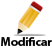
<style>
.page{position:relative;width:52px;height:48px;background:#ffffff}
.page>*{position:absolute;margin:0}
.t1{font:12px "MyriadPro-Bold";color:#010101}
</style>
<div class="page">
<p class="t1" style="left:1px;top:37px;width:51px;height:9px">Modificar</p>
</div>
